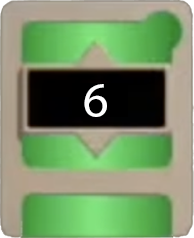
<style>
.page{position:relative;width:194px;height:238px}
.page>*{position:absolute;margin:0}
.t1{font:50px "MyriadPro-Regular";color:#ffffff}
</style>
<div class="page">
<p class="t1" style="left:84px;top:84px;width:23px;height:33px">6</p>
</div>
